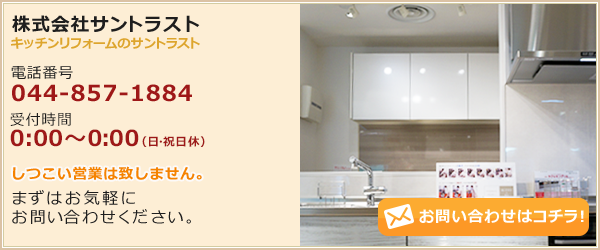
<style>
.page{position:relative;width:600px;height:250px;background:#fdeed5}
.page>*{position:absolute;margin:0}
.t1{font:18.6px "Meiryo-Bold";letter-spacing:0.05em;color:#1e1e1e}
.t2{font:13px "Meiryo-Bold";letter-spacing:0.05em;color:#dda52d}
.t3{font:22px/22.8px "Meiryo-Bold";letter-spacing:0.05em;color:#9e1818}
.t4{font:15px/22.8px "Meiryo";letter-spacing:0.05em;color:#1e1e1e}
.t5{font:22px/21.2px "Meiryo-Bold";letter-spacing:0.05em;color:#9e1818}
.t6{font:15px/21.2px "Meiryo";letter-spacing:0.05em;color:#1e1e1e}
.t7{font:11.8px/21.2px "Meiryo-Bold";letter-spacing:0.05em;color:#9e1818}
.t8{font:14.7px "Meiryo-Bold";letter-spacing:0.05em;color:#f58200}
.t9{font:16.4px/18.2px "Meiryo";letter-spacing:0.05em;color:#1e1e1e}
.t10{font:15.6px "Meiryo-Bold";letter-spacing:0.05em;color:#ffffff}
</style>
<div class="page">
<p class="t1" style="left:12px;top:15px;width:188px;height:18px">株式会社サントラスト</p>
<p class="t2" style="left:11px;top:37px;width:189px;height:12px">キッチンリフォームのサントラスト</p>
<p class="t3" style="left:11px;top:66px;width:181px;height:36px"><span class="t4">電話番号<br></span>044-857-1884</p>
<p class="t5" style="left:10px;top:112px;width:195px;height:35px"><span class="t6">受付時間 <br></span>0:00〜0:00<span class="t7">（日・祝日休）</span></p>
<p class="t8" style="left:13px;top:166px;width:189px;height:14px">しつこい営業は致しません。</p>
<p class="t9" style="left:12px;top:190px;width:179px;height:34px">まずはお気軽に<br>お問い合わせください。</p>
<p class="t10" style="left:419px;top:209px;width:165px;height:14px">お問い合わせはコチラ！</p>
</div>
